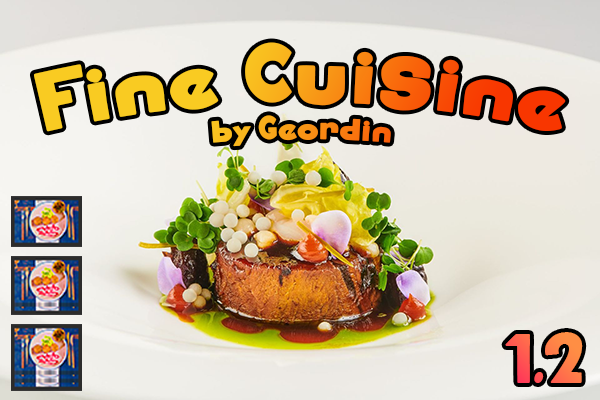
<style>
.page{position:relative;width:600px;height:400px}
.page>*{position:absolute;margin:0}
.t1{font:78.5px "hollow-mummy"}
.t2{font:30.7px "hollow-mummy"}
.t3{font:64px "hollow-mummy"}
</style>
<div class="page">
<p class="t1" style="left:33px;top:42px;width:533px;height:105px;text-align:center">Fine Cuisine<br><span class="t2">by Geordin</span></p>
<p class="t3" style="left:505px;top:332px;width:78px;height:51px">1.2</p>
</div>
